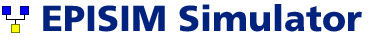
<style>
.page{position:relative;width:368px;height:40px;background:#ffffff}
.page>*{position:absolute;margin:0}
.t1{font:36px "Frutiger75-Black";color:#02237d}
</style>
<div class="page">
<p class="t1" style="left:43px;top:4px;width:319px;height:28px">EPISIM Simulator</p>
</div>
